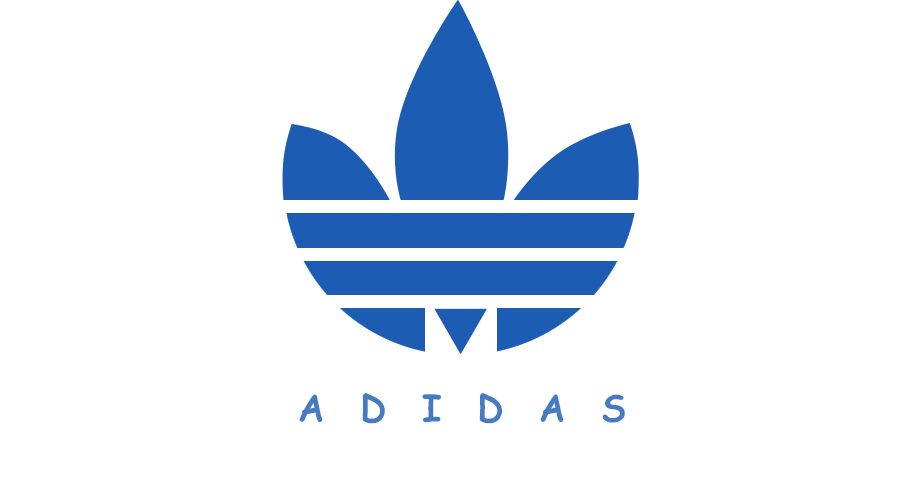
<style>
.page{position:relative;width:900px;height:500px;background:#ffffff}
.page>*{position:absolute;margin:0}
.t1{font:36px "ComicSansMS";letter-spacing:0.32em;color:#477bc1;text-transform:uppercase;font-weight:bold}
</style>
<div class="page">
<p class="t1" style="left:299px;top:393px;width:326px;height:31px">A D I D A S</p>
</div>
